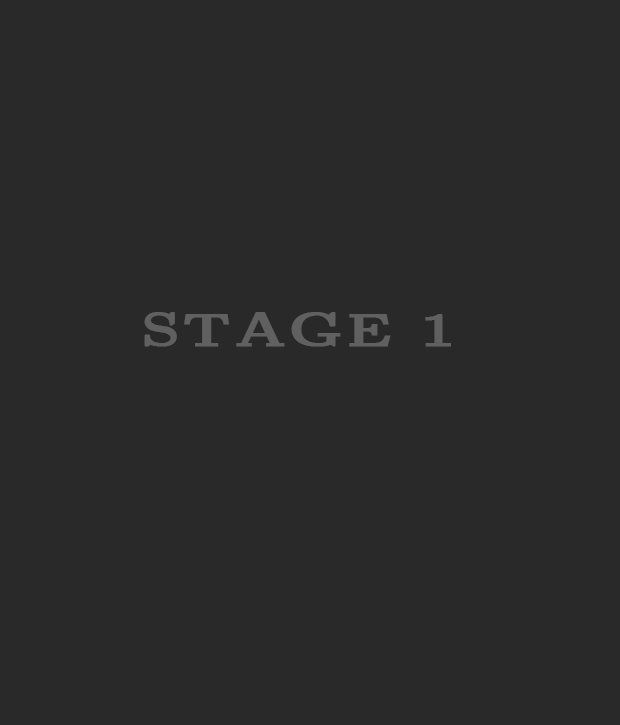
<style>
.page{position:relative;width:620px;height:725px;background:#292929}
.page>*{position:absolute;margin:0}
.t1{font:48px "Cmbx5";color:#606060;font-weight:bold}
</style>
<div class="page">
<p class="t1" style="left:144px;top:312px;width:307px;height:35px">STAGE 1</p>
</div>
